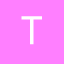
<style>
.page{position:relative;width:64px;height:64px;background:#ff7fff}
.page>*{position:absolute;margin:0}
.t1{font:39.2px "ArialNarrow";color:#ffffff;scale:1.13 1}
</style>
<div class="page">
<p class="t1" style="left:21px;top:16px;width:21px;height:29px">T</p>
</div>
